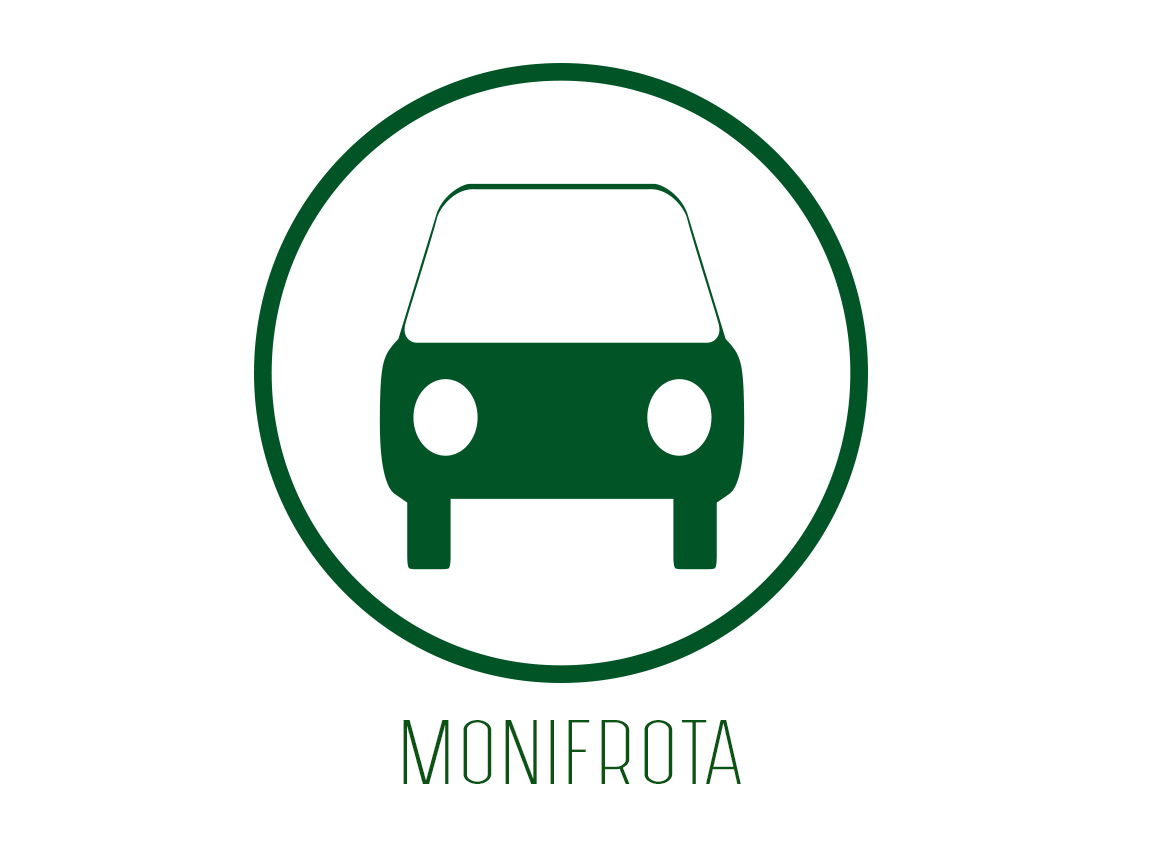
<style>
.page{position:relative;width:1152px;height:864px;background:#ffffff}
.page>*{position:absolute;margin:0}
.t1{font:68.9px "PostScriptum-Light";color:#0a5413;scale:1.41 1}
</style>
<div class="page">
<p class="t1" style="left:403px;top:720px;width:338px;height:64px">MONIFROTA</p>
</div>
